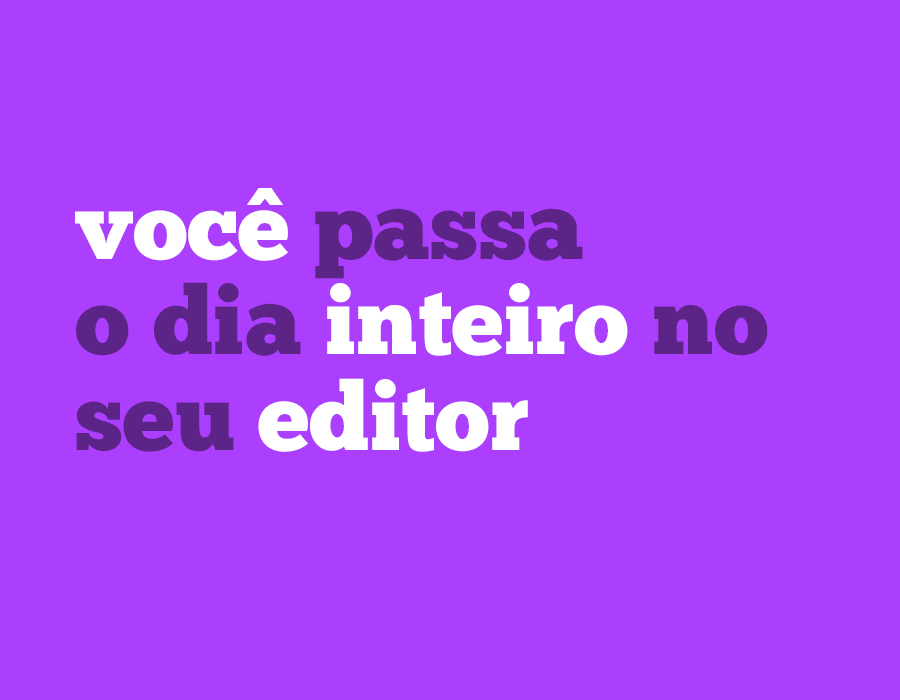
<style>
.page{position:relative;width:900px;height:700px;background:#ac3ffe}
.page>*{position:absolute;margin:0}
.t1{font:84.1px "GothamUltra";color:#ffffff}
.t2{font:94.9px/95.9px "ChunkFive-Roman";color:#5d2488}
.t3{font:94.9px/95.9px "ChunkFive-Roman";color:#ffffff}
</style>
<div class="page">
<p class="t1" style="left:247px;top:188px;width:36px;height:17px">^</p>
<p class="t2" style="left:75px;top:208px;width:693px;height:244px"><span class="t3">voce</span> passa<br>o dia <span class="t3">inteiro</span> no<br>seu <span class="t3">editor</span></p>
</div>
